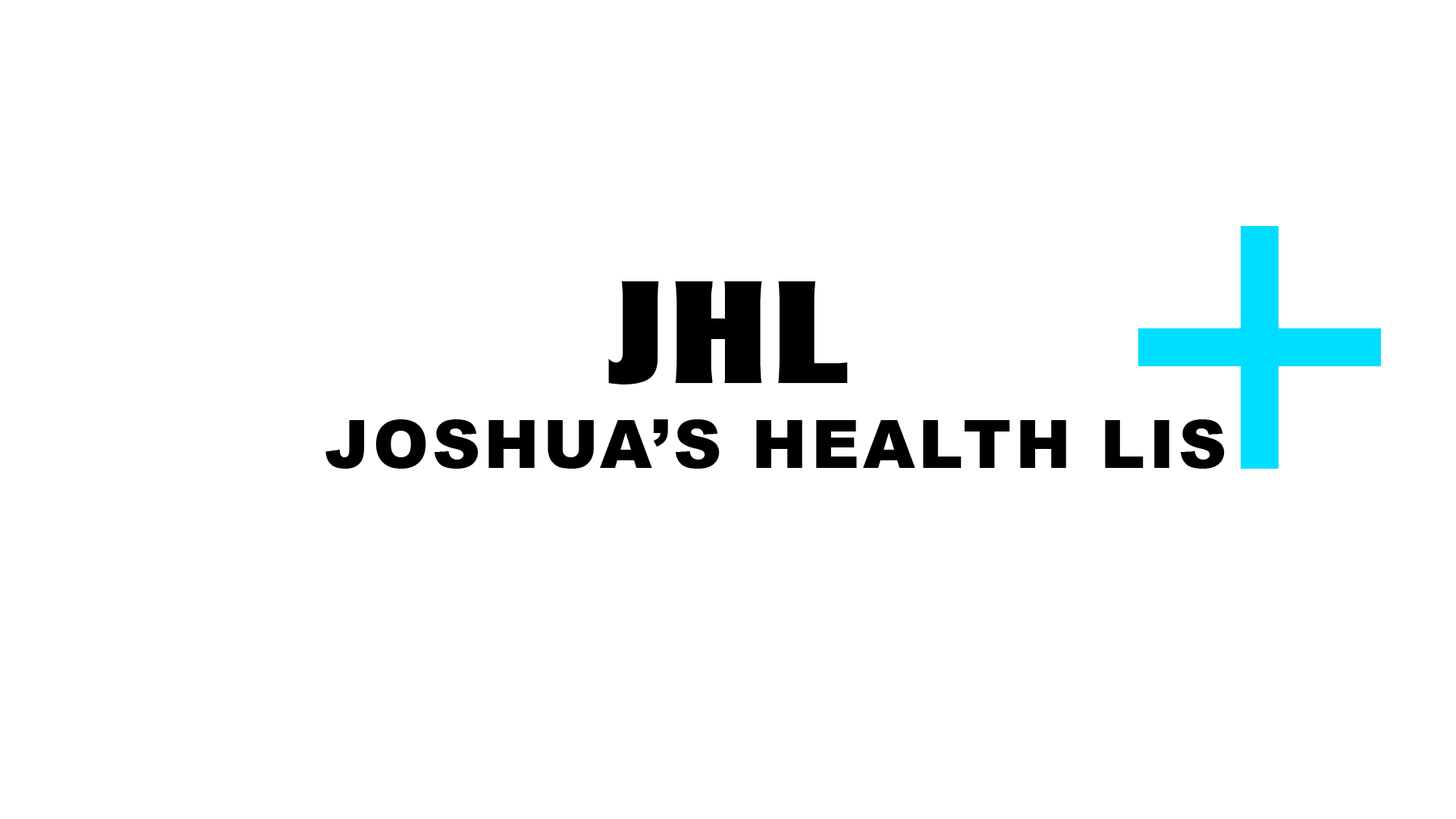
<style>
.page{position:relative;width:1456px;height:819px;background:#ffffff}
.page>*{position:absolute;margin:0}
.t1{font:142.2px "CleargothicLH-Bold";letter-spacing:0.06em;color:#000000}
.t2{font:66.4px "Arial-Black";letter-spacing:0.06em;color:#000000}
</style>
<div class="page">
<p class="t1" style="left:608px;top:281px;width:240px;height:103px">JHL</p>
<p class="t2" style="left:325px;top:419px;width:900px;height:50px">JOSHUA’S HEALTH LIS</p>
</div>
